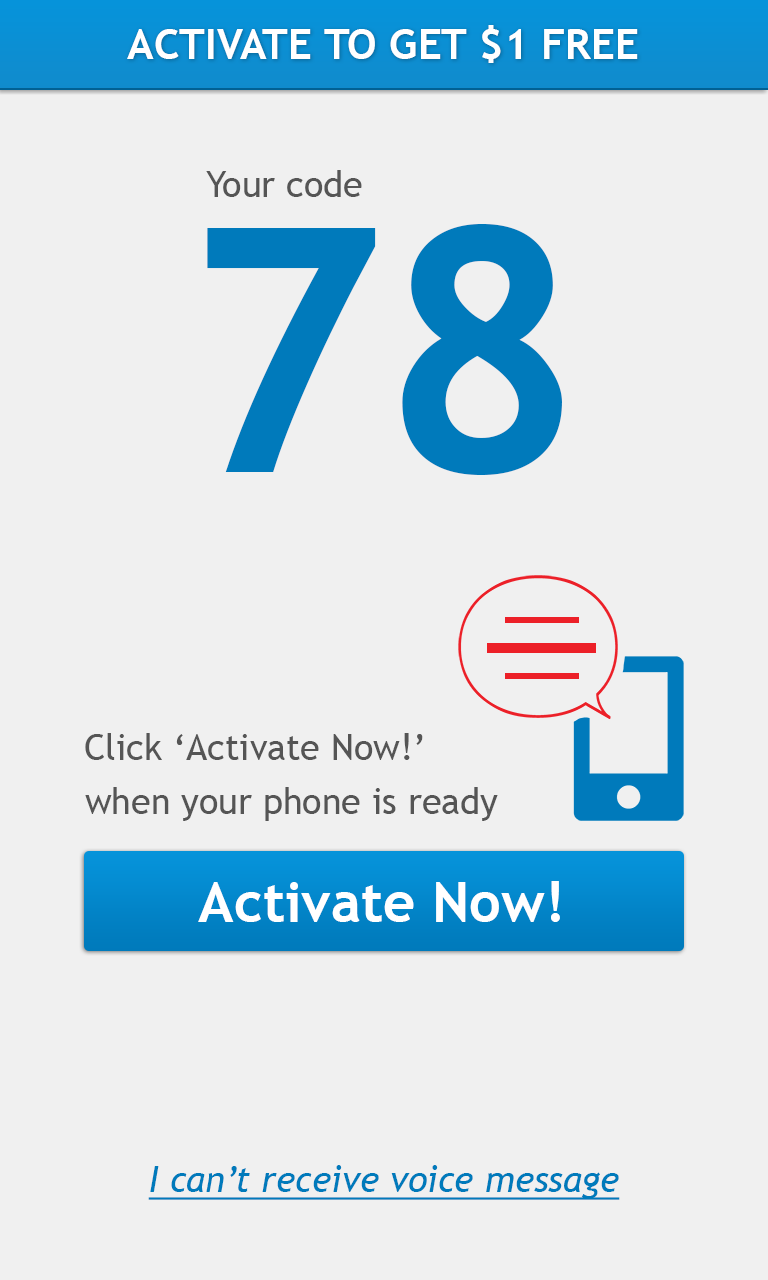
<style>
.page{position:relative;width:768px;height:1280px;background:#f0f0f0}
.page>*{position:absolute;margin:0}
.t1{font:42px "TrebuchetMS-Bold";color:#ffffff}
.t2{font:36px "TrebuchetMS";color:#555555}
.t3{font:340px "TrebuchetMS-Bold";color:#007abb}
.t4{font:56px "TrebuchetMS-Bold";color:#ffffff}
.t5{font:36px "TrebuchetMS-Italic";color:#007abb;text-decoration:underline}
</style>
<div class="page">
<p class="t1" style="left:127px;top:25px;width:511px;height:38px">ACTIVATE TO GET $1 FREE</p>
<p class="t2" style="left:206px;top:170px;width:156px;height:27px">Your code</p>
<p class="t3" style="left:207px;top:224px;width:355px;height:251px">78</p>
<p class="t2" style="left:85px;top:733px;width:338px;height:27px">Click ‘Activate Now!’</p>
<p class="t2" style="left:85px;top:787px;width:413px;height:34px">when your phone is ready</p>
<p class="t4" style="left:198px;top:881px;width:362px;height:41px">Activate Now!</p>
<p class="t5" style="left:148px;top:1165px;width:472px;height:35px">I can’t receive voice message</p>
</div>
